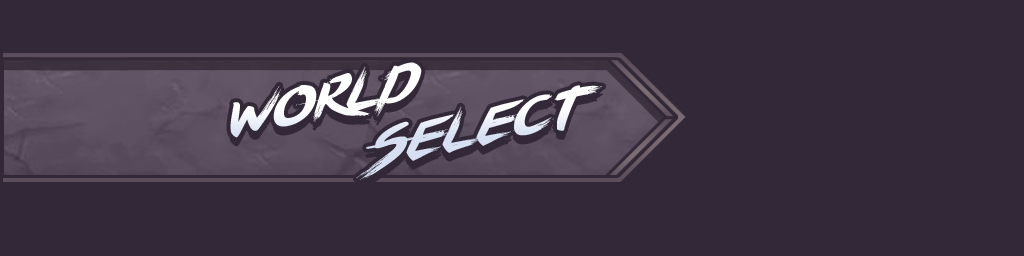
<style>
.page{position:relative;width:1024px;height:256px;background:#322838}
.page>*{position:absolute;margin:0}
.t1{font:72px/60px "BRUSHSTRIKE";color:#f7f9fd}
</style>
<div class="page">
<p class="t1" style="left:230px;top:62px;width:373px;height:118px;rotate:-12deg">world<br>     Select</p>
</div>
